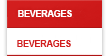
<style>
.page{position:relative;width:109px;height:56px;background:#ffffff}
.page>*{position:absolute;margin:0}
.t1{font:9px "Arial-BoldMT";letter-spacing:-0.025em;color:#ffffff}
.t2{font:9px "Arial-BoldMT";letter-spacing:-0.025em;color:#d31f1f}
</style>
<div class="page">
<p class="t1" style="left:18px;top:10px;width:54px;height:7px">BEVERAGES</p>
<p class="t2" style="left:17px;top:40px;width:54px;height:7px">BEVERAGES</p>
</div>
